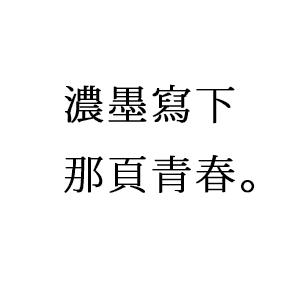
<style>
.page{position:relative;width:299px;height:299px;background:#ffffff}
.page>*{position:absolute;margin:0}
.t1{font:40px "KozMinPro-ExtraLight";letter-spacing:0.07em;color:#000000;font-weight:bold}
</style>
<div class="page">
<p class="t1" style="left:64px;top:84px;width:191px;height:109px">濃墨寫下<br>那頁青春。</p>
</div>
